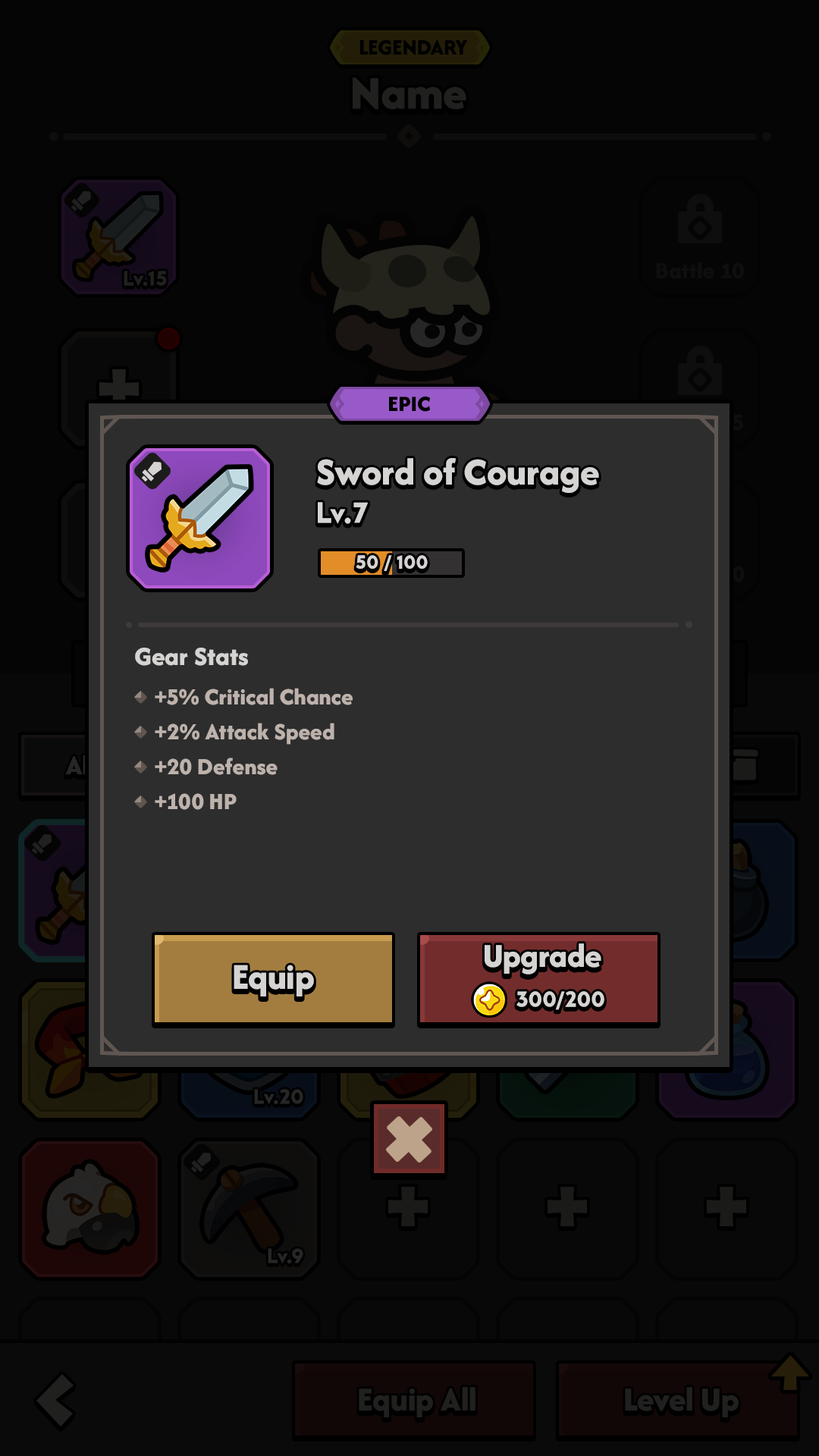
<style>
.page{position:relative;width:819px;height:1456px;background:#050505}
.page>*{position:absolute;margin:0}
.t1{font:22.7px "AfacadFlux-ExtraBold";color:#000000;text-transform:uppercase}
.t2{font:39.4px "AfacadFlux-ExtraBold";color:#d6d4d3}
.t3{font:30.3px "LTAvocado-Bold";color:#d6d4d3}
.t4{font:19.7px "LTAvocado-Bold";color:#d6d4d3;text-transform:uppercase}
.t5{font:27.3px "AfacadFlux-ExtraBold";color:#d6d4d3}
.t6{font:24.3px/35px "AfacadFlux-ExtraBold";color:#bdb2ac}
.t7{font:34.9px "AfacadFlux-ExtraBold";color:#d6d4d3}
.t8{font:37.9px "AfacadFlux-ExtraBold";color:#d6d4d3}
.t9{font:22.7px "LTAvocado-Bold";color:#d6d4d3}
</style>
<div class="page">
<p class="t1" style="left:389px;top:396px;width:42px;height:16px">Epic</p>
<p class="t2" style="left:317px;top:458px;width:282px;height:35px">Sword of Courage</p>
<p class="t3" style="left:318px;top:502px;width:51px;height:22px">Lv.7</p>
<p class="t4" style="left:356px;top:555px;width:72px;height:16px">50 / 100</p>
<p class="t5" style="left:135px;top:648px;width:113px;height:18px">Gear Stats</p>
<p class="t6" style="left:155px;top:688px;width:198px;height:122px">+5% Critical Chance<br>+2% Attack Speed<br>+20 Defense<br>+100 HP</p>
<p class="t7" style="left:485px;top:943px;width:116px;height:31px">Upgrade</p>
<p class="t8" style="left:234px;top:965px;width:80px;height:31px">Equip</p>
<p class="t9" style="left:516px;top:991px;width:88px;height:19px">300/200</p>
</div>
